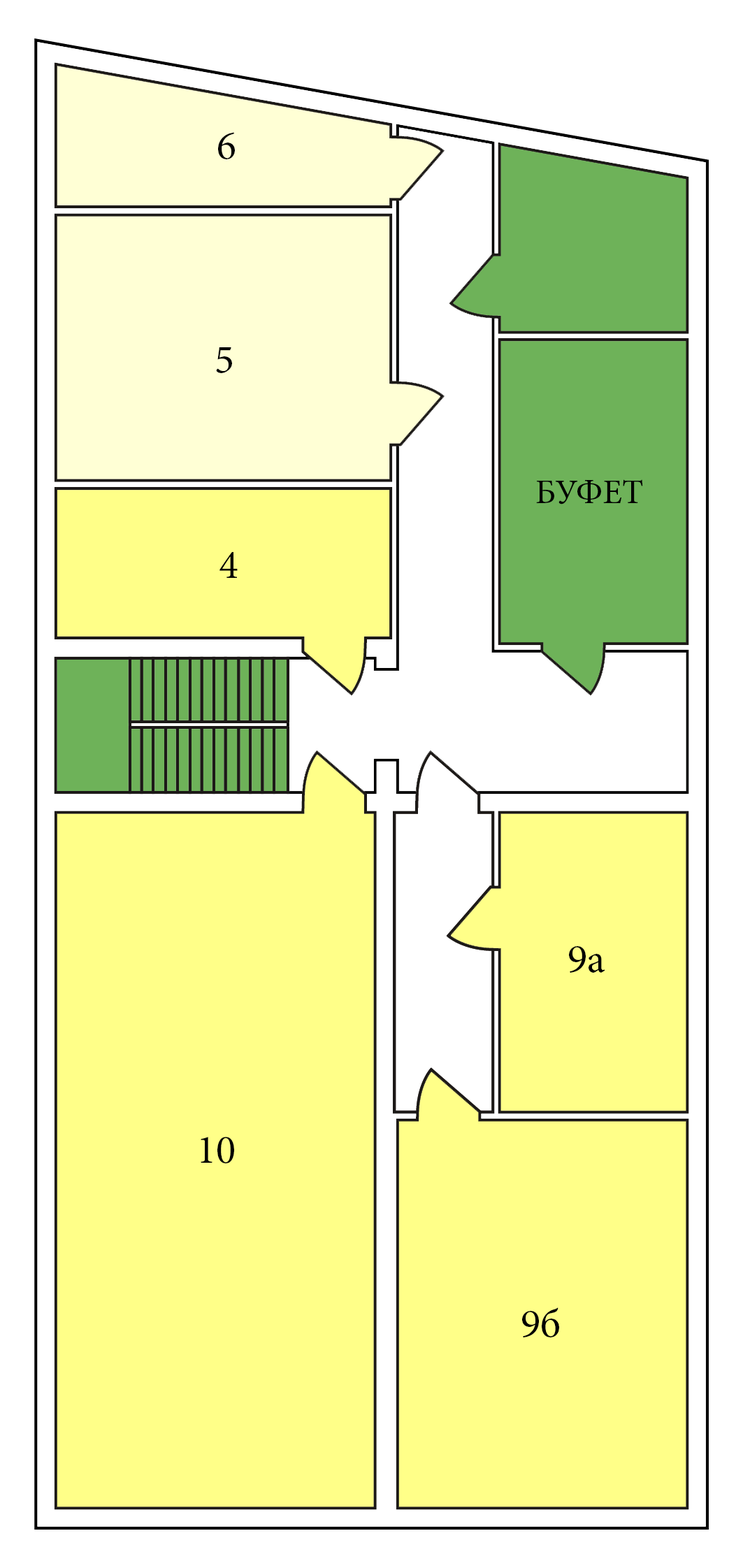
<style>
.page{position:relative;width:743px;height:1568px;background:#ffff88}
.page>*{position:absolute;margin:0}
.t1{font:40.8px "MinionPro-Regular";color:#000000}
.t2{font:34.8px "MinionPro-Regular";color:#000000}
</style>
<div class="page">
<p class="t1" style="left:218px;top:132px;width:17px;height:27px">6</p>
<p class="t1" style="left:216px;top:347px;width:16px;height:26px">5</p>
<p class="t2" style="left:536px;top:479px;width:107px;height:25px">БУФЕТ</p>
<p class="t1" style="left:219px;top:552px;width:19px;height:26px">4</p>
<p class="t1" style="left:569px;top:946px;width:36px;height:27px">9а</p>
<p class="t1" style="left:201px;top:1137px;width:33px;height:26px">10</p>
<p class="t1" style="left:522px;top:1307px;width:37px;height:30px">9б</p>
</div>
